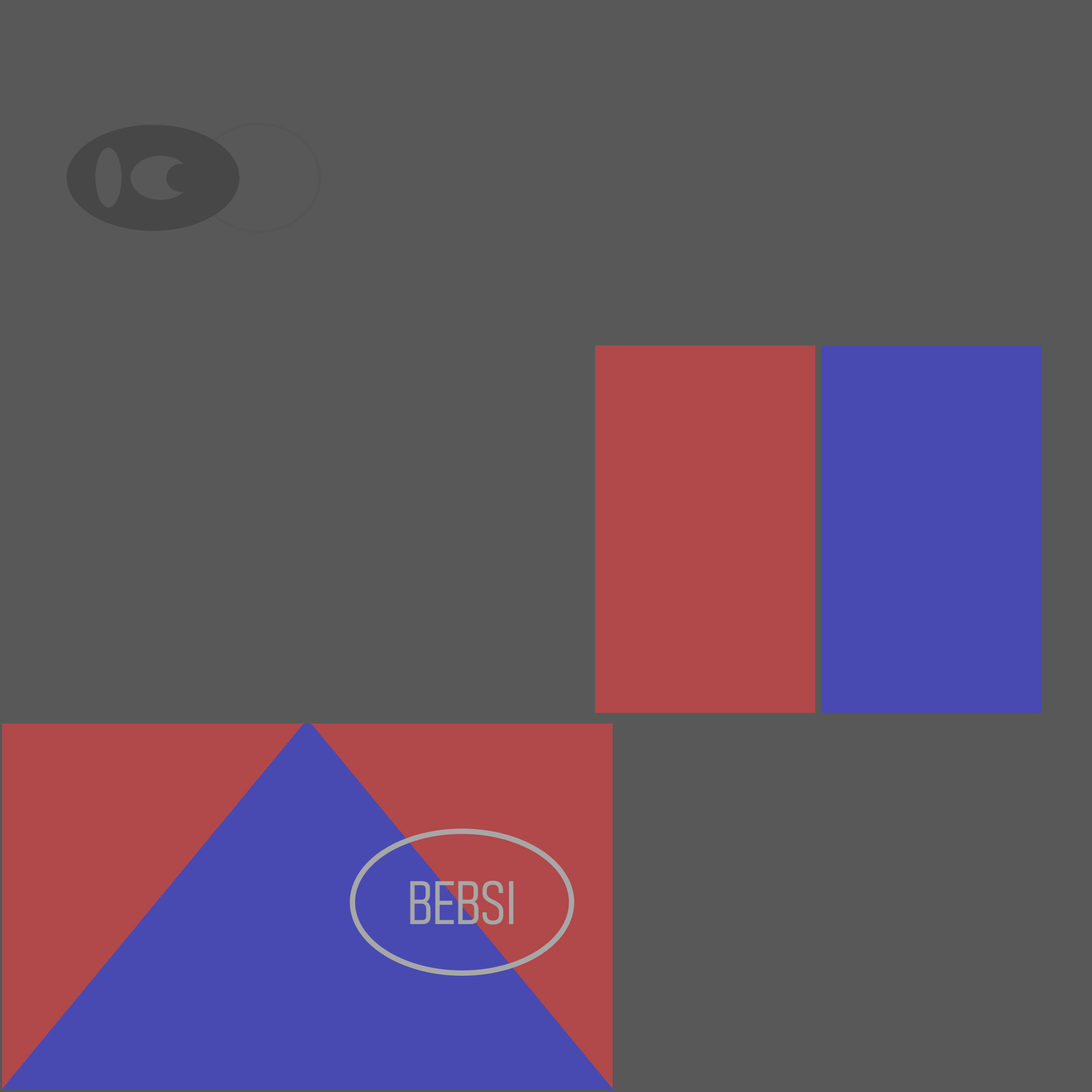
<style>
.page{position:relative;width:1092px;height:1092px;background:#585858}
.page>*{position:absolute;margin:0}
.t1{font:60.3px "Bahnschrift-LightCondensed";color:#a7a7a7}
</style>
<div class="page">
<p class="t1" style="left:410px;top:880px;width:103px;height:45px">BEBSI</p>
</div>
